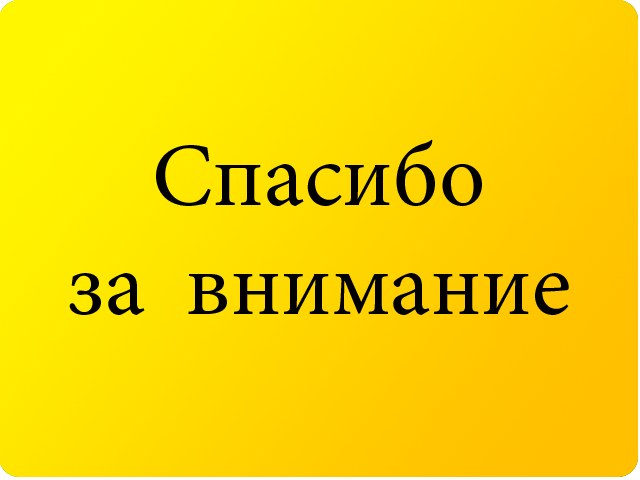
<style>
.page{position:relative;width:640px;height:480px}
.page>*{position:absolute;margin:0}
.t1{font:90.4px "MinionPro-Regular";color:#000000}
</style>
<div class="page">
<p class="t1" style="left:69px;top:139px;width:500px;height:176px;text-align:center">Спасибо<br>за  внимание</p>
</div>
